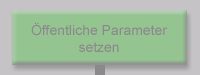
<style>
.page{position:relative;width:200px;height:75px;background:#94c591}
.page>*{position:absolute;margin:0}
.t1{font:14px "ArialMT";color:#8b898b}
</style>
<div class="page">
<p class="t1" style="left:31px;top:22px;width:137px;height:30px;text-align:center">Öffentliche Parameter<br>setzen</p>
</div>
